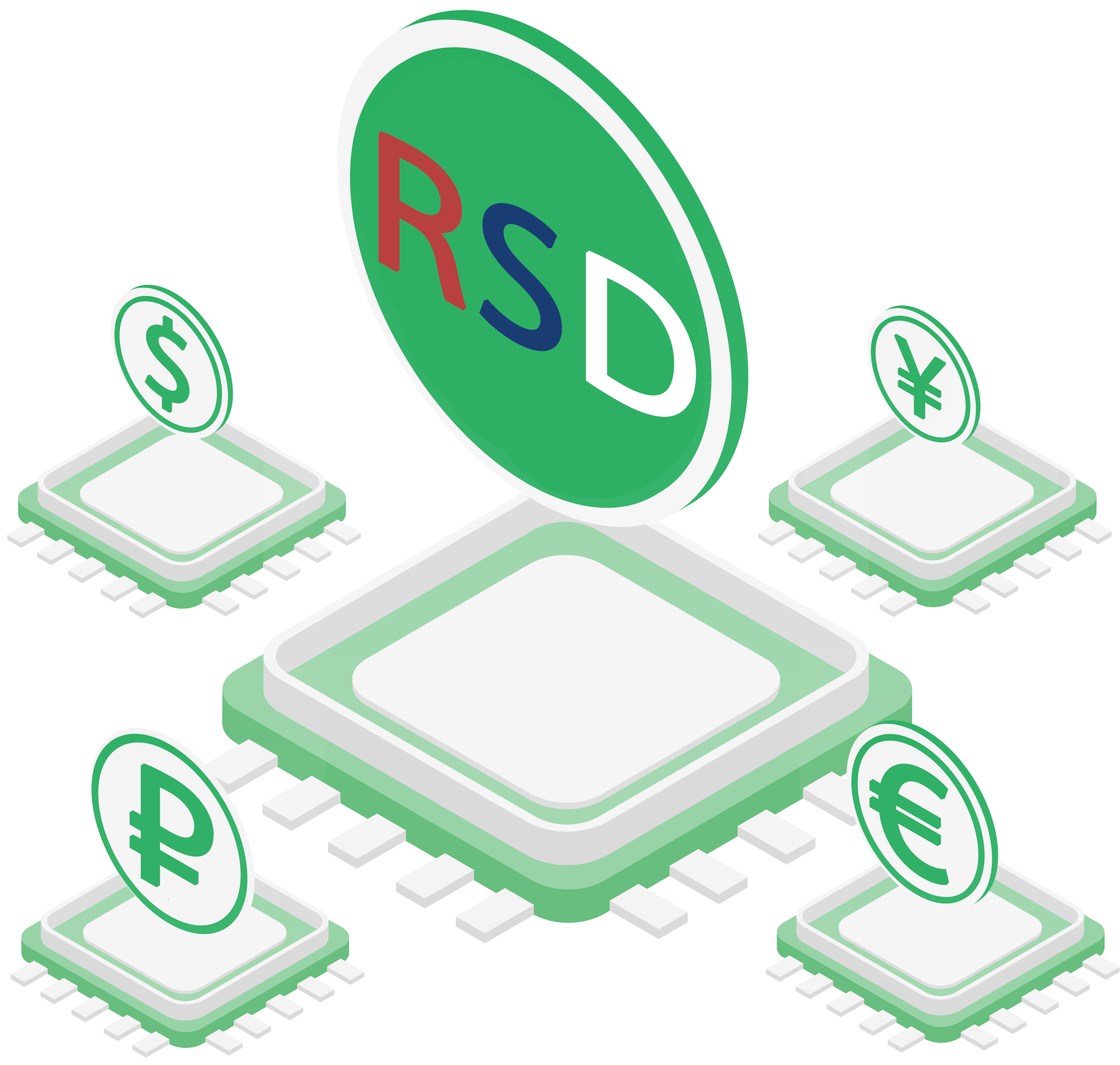
<style>
.page{position:relative;width:1120px;height:1065px;background:#ffffff}
.page>*{position:absolute;margin:0}
.t1{font:191.1px "MyriadPro-Regular";color:#b8403f;font-weight:bold;scale:1.15 1}
.t2{font:191.1px "MyriadPro-Regular";color:#193d73;font-weight:bold;scale:1.15 1}
.t3{font:191.1px "MyriadPro-Regular";color:#ffffff;font-weight:bold;scale:1.15 1}
.t4{font:111.2px "MyriadPro-Regular";color:#30b167;font-weight:bold;scale:1.15 1}
.t5{font:103.2px "MyriadPro-Regular";color:#30b167;font-weight:bold;scale:1.15 1}
.t6{font:171.9px "MyriadPro-Regular";color:#30b167;font-weight:bold;scale:1.15 1}
.t7{font:154.5px "MyriadPro-Regular";color:#30b167;font-weight:bold;scale:1.15 1}
</style>
<div class="page">
<p class="t1" style="left:378px;top:131px;width:318px;height:286px;rotate:30deg">R<span class="t2">S</span><span class="t3">D</span></p>
<p class="t4" style="left:144px;top:315px;width:46px;height:98px;rotate:30deg">$</p>
<p class="t5" style="left:893px;top:333px;width:53px;height:87px;rotate:30deg">¥</p>
<p class="t6" style="left:129px;top:763px;width:85px;height:124px;rotate:30deg">₽</p>
<p class="t7" style="left:869px;top:764px;width:80px;height:121px;rotate:30deg">€</p>
</div>
